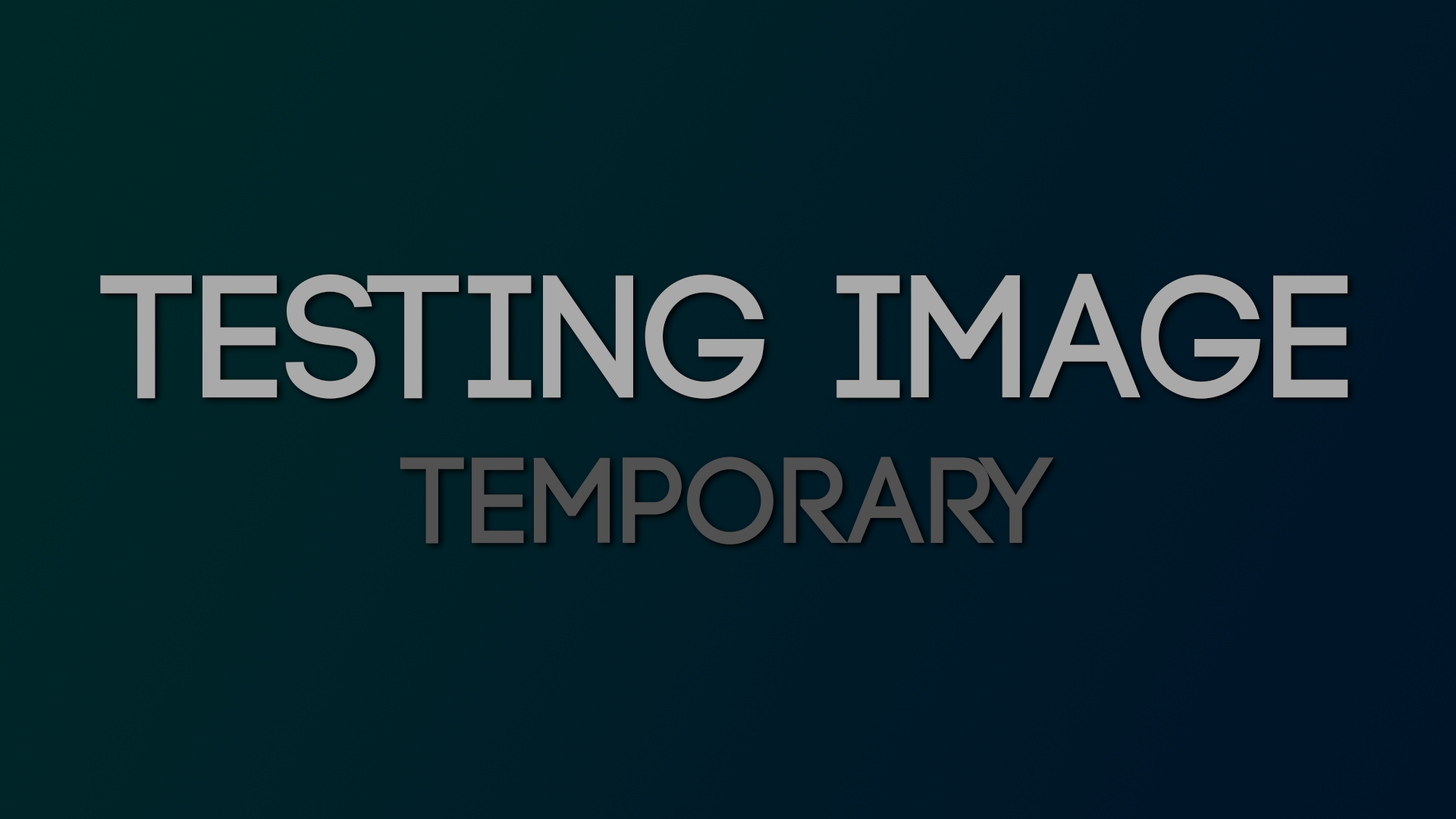
<style>
.page{position:relative;width:1456px;height:819px}
.page>*{position:absolute;margin:0}
.t1{font:174.4px "Code-Bold";letter-spacing:0.02em;color:#a9a9a9}
.t2{font:121.3px "Code-Bold";letter-spacing:0.02em;color:#515151}
</style>
<div class="page">
<p class="t1" style="left:100px;top:274px;width:1248px;height:270px;text-align:center">Testing image<br><span class="t2">temporary</span></p>
</div>
